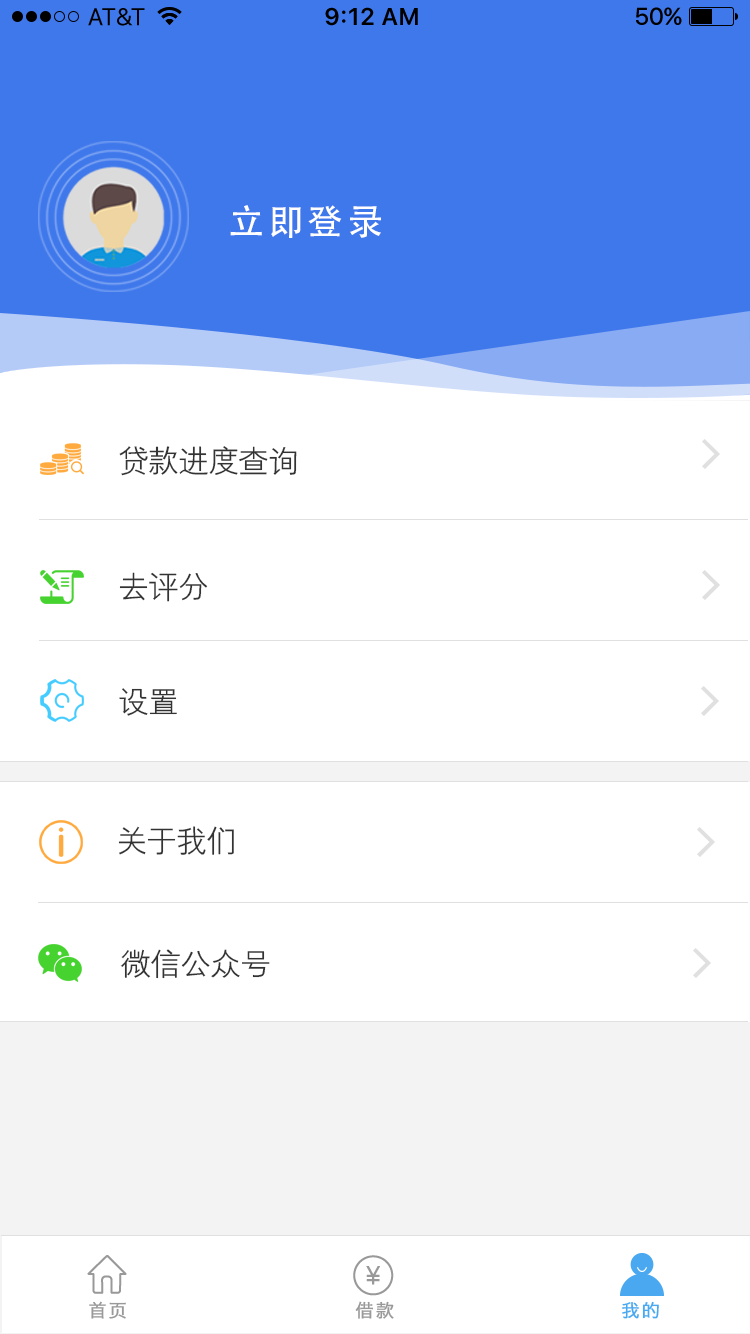
<style>
.page{position:relative;width:750px;height:1334px;background:#ffffff}
.page>*{position:absolute;margin:0}
.t1{font:36px "AdobeHeitiStd-Regular";letter-spacing:0.1em;color:#ffffff}
.t2{font:30px "HYZhongJianHeiJ";color:#333333}
.t3{font:18px "MingHei_R";letter-spacing:0.1em;color:#999999;font-weight:bold}
.t4{font:18px "MingHei_R";letter-spacing:0.1em;color:#49a8ef;font-weight:bold}
</style>
<div class="page">
<p class="t1" style="left:230px;top:205px;width:151px;height:33px">立即登录</p>
<p class="t2" style="left:119px;top:446px;width:178px;height:30px">贷款进度查询</p>
<p class="t2" style="left:119px;top:572px;width:89px;height:30px">去评分</p>
<p class="t2" style="left:119px;top:688px;width:58px;height:28px">设置</p>
<p class="t2" style="left:118px;top:826px;width:116px;height:29px">关于我们</p>
<p class="t2" style="left:120px;top:949px;width:150px;height:30px">微信公众号</p>
<p class="t3" style="left:89px;top:1301px;width:37px;height:18px">首页</p>
<p class="t3" style="left:355px;top:1301px;width:39px;height:18px">借款</p>
<p class="t4" style="left:622px;top:1301px;width:37px;height:18px">我的</p>
</div>
